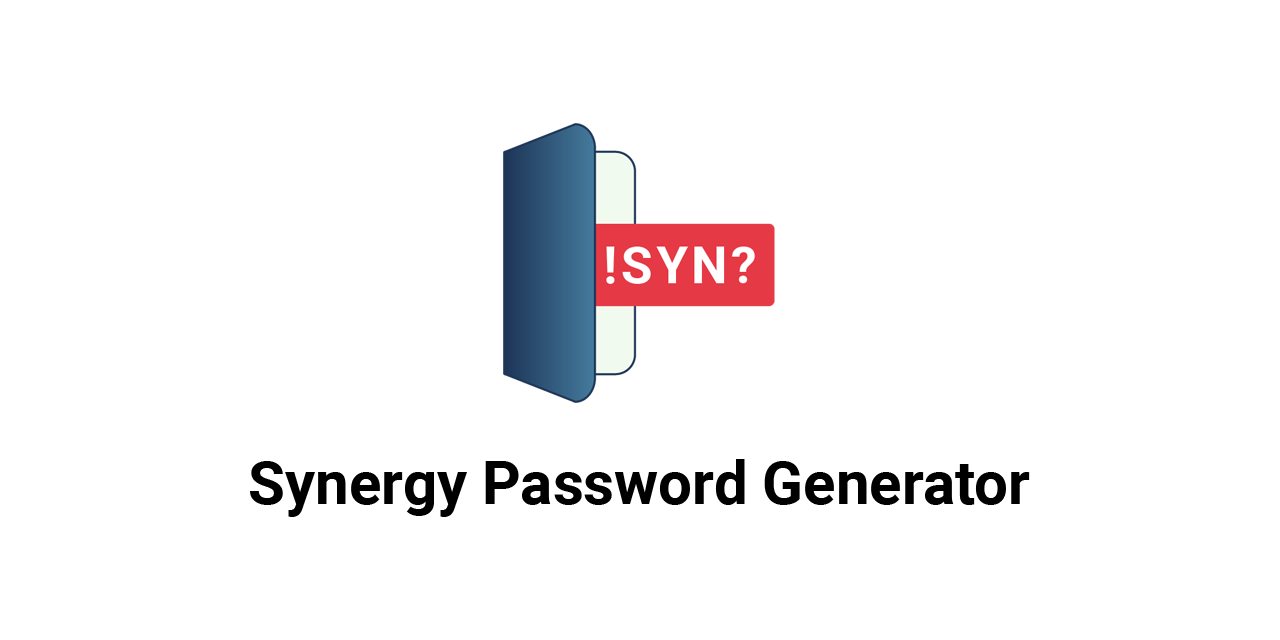
<style>
.page{position:relative;width:1280px;height:640px;background:#ffffff}
.page>*{position:absolute;margin:0}
.t1{font:60px "Roboto-Bold";color:#000000}
</style>
<div class="page">
<p class="t1" style="left:250px;top:459px;width:780px;height:58px">Synergy Password Generator</p>
</div>
